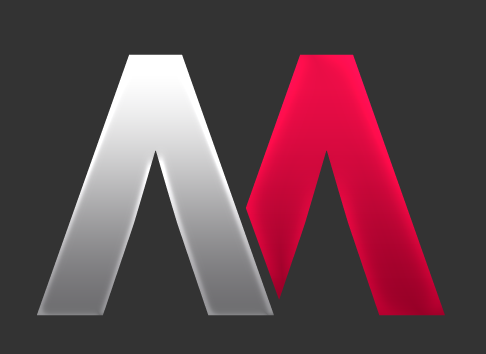
<style>
.page{position:relative;width:486px;height:354px;background:#333333}
.page>*{position:absolute;margin:0}
.t1{font:432.6px "BaileySansITC-Bold"}
</style>
<div class="page">
<p class="t1" style="left:37px;top:54px;width:237px;height:262px;rotate:180deg">V</p>
<p class="t1" style="left:208px;top:54px;width:237px;height:262px;rotate:180deg">V</p>
</div>
